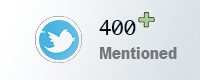
<style>
.page{position:relative;width:200px;height:80px}
.page>*{position:absolute;margin:0}
.t1{font:19.6px "Ayuthaya";color:#010d13;scale:1.05 1}
.t2{font:16.3px "Arial-Black";color:#74787a;scale:0.84 1}
</style>
<div class="page">
<p class="t1" style="left:99px;top:20px;width:37px;height:15px">400</p>
<p class="t2" style="left:100px;top:47px;width:77px;height:12px">Mentioned</p>
</div>
